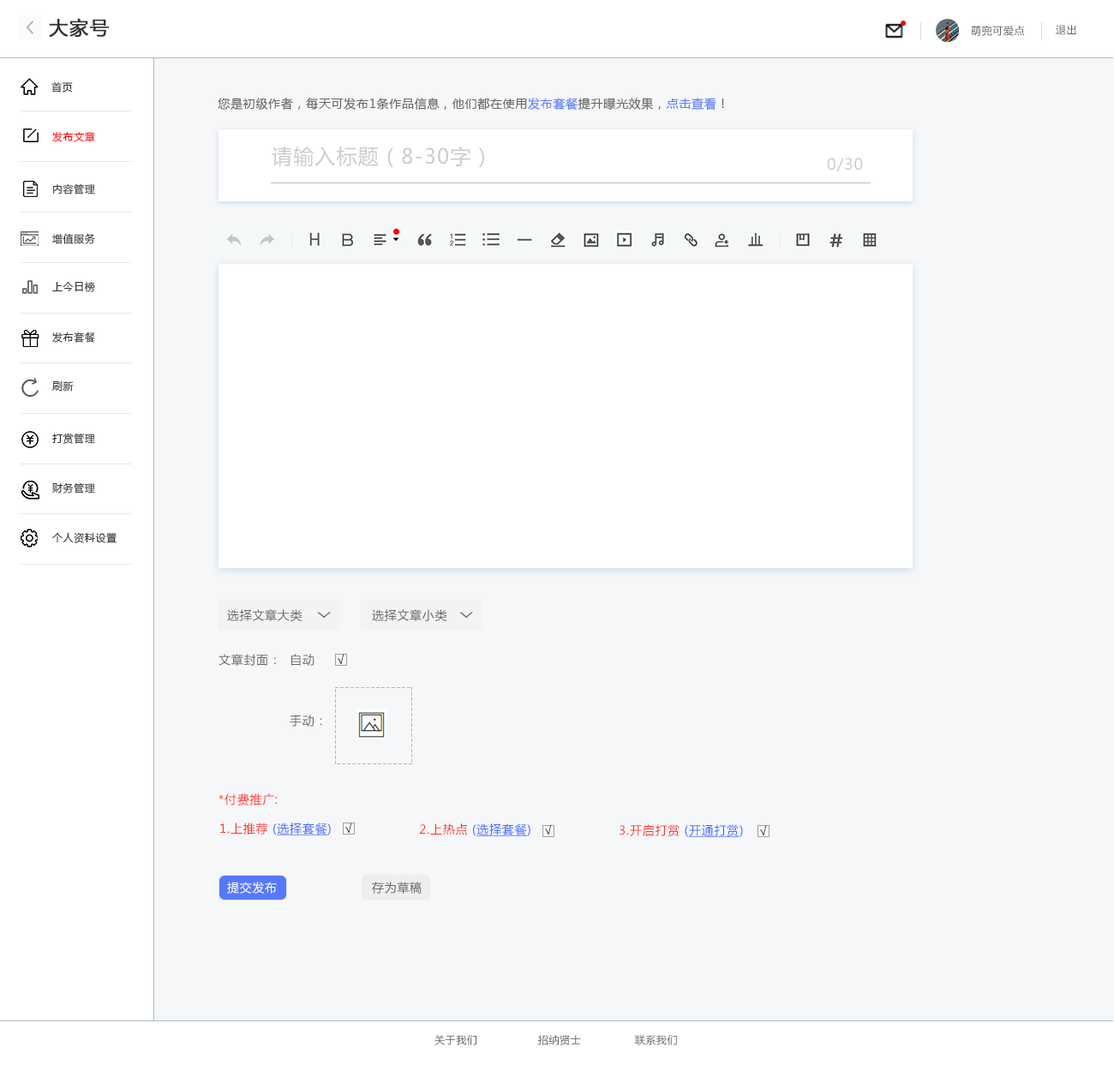
<style>
.page{position:relative;width:1114px;height:1071px;background:#f6f7f8}
.page>*{position:absolute;margin:0}
.t1{font:18.8px "MicrosoftYaHei";letter-spacing:0.05em;color:#333333;font-weight:bold}
.t2{font:10.3px "MicrosoftYaHei";letter-spacing:0.05em;color:#666666}
.t3{font:10.3px "MicrosoftYaHei";letter-spacing:0.05em;color:#333333}
.t4{font:12px "MicrosoftYaHei";letter-spacing:0.05em;color:#666666}
.t5{font:12px "MicrosoftYaHei";letter-spacing:0.05em;color:#5d7efa}
.t6{font:10.3px "MicrosoftYaHei";letter-spacing:0.05em;color:#ff0000}
.t7{font:20.6px "MicrosoftYaHei";letter-spacing:0.05em;color:#cdcccc}
.t8{font:15.4px "MicrosoftYaHei";letter-spacing:0.05em;color:#cdcccc}
.t9{font:15.4px "MicrosoftYaHei";letter-spacing:0.05em;color:#666666;scale:0.97 1}
.t10{font:12px "MicrosoftYaHei";letter-spacing:0.05em}
.t11{font:12px "MicrosoftYaHei";letter-spacing:0.05em;color:#ff3333}
.t12{font:12px "MicrosoftYaHei";letter-spacing:0.05em;color:#466dff}
.t13{font:12px "MicrosoftYaHei";letter-spacing:0.05em;color:#466dff;text-decoration:underline}
.t14{font:12px "MicrosoftYaHei";letter-spacing:0.05em;color:#ffffff}
</style>
<div class="page">
<p class="t1" style="left:49px;top:18px;width:60px;height:20px">大家号</p>
<p class="t2" style="left:971px;top:26px;width:54px;height:10px">萌兜可爱点</p>
<p class="t2" style="left:1055px;top:25px;width:21px;height:10px">退出</p>
<p class="t3" style="left:51px;top:81px;width:22px;height:12px">首页</p>
<p class="t4" style="left:218px;top:98px;width:506px;height:13px">您是初级作者，每天可发布1条作品信息，他们都在使用<span class="t5">发布套餐</span>提升曝光效果，<span class="t5">点击查看</span>！</p>
<p class="t6" style="left:52px;top:131px;width:43px;height:11px">发布文章</p>
<p class="t7" style="left:272px;top:146px;width:212px;height:21px">请输入标题（8-30字）</p>
<p class="t8" style="left:827px;top:158px;width:36px;height:14px">0/30</p>
<p class="t3" style="left:53px;top:183px;width:42px;height:11px">内容管理</p>
<p class="t3" style="left:52px;top:233px;width:43px;height:11px">增值服务</p>
<p class="t3" style="left:52px;top:281px;width:43px;height:11px">上今日榜</p>
<p class="t3" style="left:52px;top:332px;width:43px;height:11px">发布套餐</p>
<p class="t3" style="left:52px;top:381px;width:22px;height:10px">刷新</p>
<p class="t3" style="left:52px;top:433px;width:43px;height:11px">打赏管理</p>
<p class="t3" style="left:52px;top:482px;width:43px;height:11px">财务管理</p>
<p class="t3" style="left:52px;top:532px;width:65px;height:11px">个人资料设置</p>
<p class="t4" style="left:227px;top:609px;width:75px;height:12px">选择文章大类</p>
<p class="t9" style="left:317px;top:612px;width:14px;height:6px;rotate:-90deg">ㄑ</p>
<p class="t4" style="left:372px;top:609px;width:75px;height:12px">选择文章小类</p>
<p class="t9" style="left:459px;top:612px;width:14px;height:6px;rotate:-90deg">ㄑ</p>
<p class="t4" style="left:218px;top:654px;width:96px;height:12px">文章封面：  自动</p>
<p class="t10" style="left:338px;top:654px;width:6px;height:10px">√</p>
<p class="t4" style="left:290px;top:714px;width:32px;height:12px">手动：</p>
<p class="t11" style="left:218px;top:793px;width:60px;height:12px">*付费推广:</p>
<p class="t11" style="left:220px;top:822px;width:111px;height:13px">1.上推荐 <span class="t12">(</span><span class="t13">选择套餐</span><span class="t12">)</span></p>
<p class="t10" style="left:345px;top:822px;width:7px;height:11px">√</p>
<p class="t11" style="left:419px;top:823px;width:111px;height:13px">2.上热点 <span class="t12">(</span><span class="t13">选择套餐</span><span class="t12">)</span></p>
<p class="t10" style="left:545px;top:824px;width:7px;height:10px">√</p>
<p class="t11" style="left:619px;top:824px;width:124px;height:13px">3.开启打赏 <span class="t12">(</span><span class="t13">开通打赏</span><span class="t12">)</span></p>
<p class="t10" style="left:760px;top:825px;width:7px;height:10px">√</p>
<p class="t14" style="left:227px;top:881px;width:50px;height:12px">提交发布</p>
<p class="t4" style="left:372px;top:881px;width:49px;height:12px">存为草稿</p>
<p class="t2" style="left:434px;top:1035px;width:243px;height:10px">关于我们                 招纳贤士               联系我们</p>
</div>
